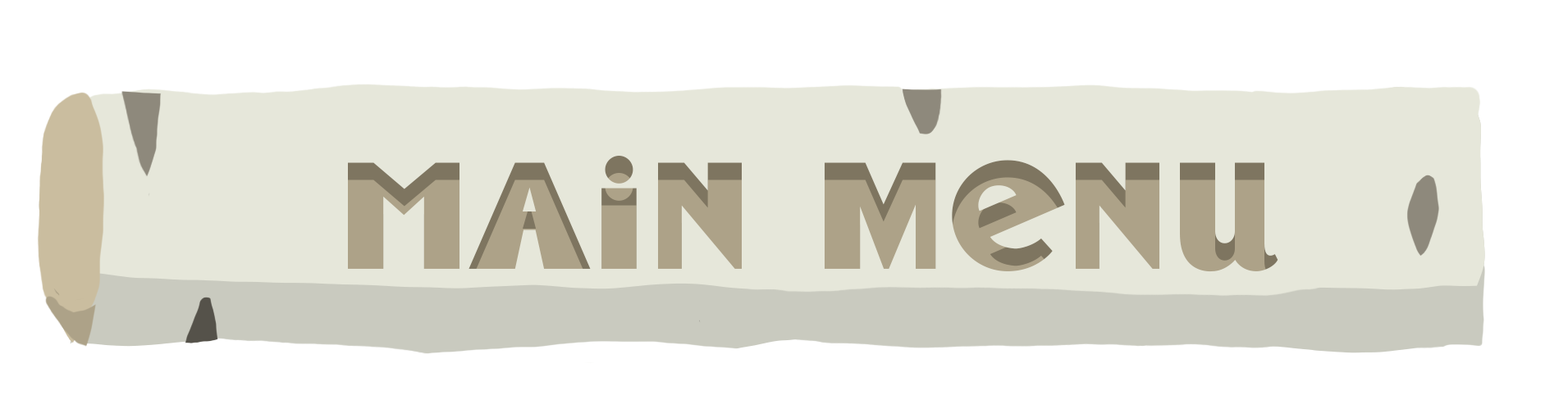
<style>
.page{position:relative;width:1568px;height:409px;background:#ffffff}
.page>*{position:absolute;margin:0}
.t1{font:148px "BadTyp-Regular";color:#ada288}
</style>
<div class="page">
<p class="t1" style="left:348px;top:156px;width:930px;height:116px">Main menu</p>
</div>
